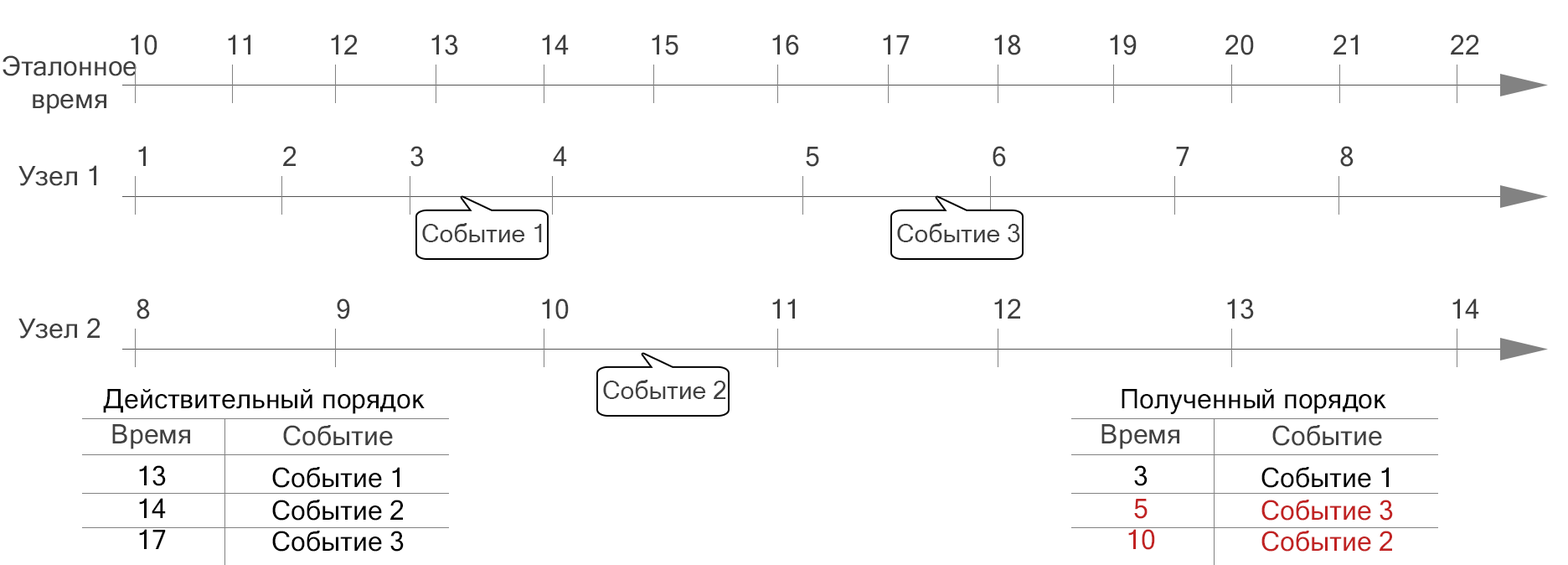
<style>
.page{position:relative;width:1568px;height:565px;background:#ffffff}
.page>*{position:absolute;margin:0}
.t1{font:26.8px "MicrosoftSansSerif";color:#3f3f3f}
.t2{font:25.1px "MicrosoftSansSerif";color:#414141}
.t3{font:26.8px "MicrosoftSansSerif";color:#000000}
.t4{font:26.8px "MicrosoftSansSerif";color:#414141}
.t5{font:26.8px "MicrosoftSansSerif";color:#c12222}
</style>
<div class="page">
<p class="t1" style="left:131px;top:34px;width:26px;height:21px">10</p>
<p class="t1" style="left:228px;top:34px;width:22px;height:20px">11</p>
<p class="t1" style="left:331px;top:34px;width:26px;height:20px">12</p>
<p class="t1" style="left:431px;top:34px;width:27px;height:21px">13</p>
<p class="t1" style="left:542px;top:34px;width:27px;height:20px">14</p>
<p class="t1" style="left:652px;top:34px;width:26px;height:21px">15</p>
<p class="t1" style="left:772px;top:34px;width:27px;height:21px">16</p>
<p class="t1" style="left:883px;top:34px;width:27px;height:20px">17</p>
<p class="t1" style="left:994px;top:34px;width:27px;height:21px">18</p>
<p class="t1" style="left:1110px;top:34px;width:27px;height:21px">19</p>
<p class="t1" style="left:1225px;top:34px;width:29px;height:21px">20</p>
<p class="t1" style="left:1333px;top:34px;width:25px;height:20px">21</p>
<p class="t1" style="left:1451px;top:34px;width:27px;height:20px">22</p>
<p class="t1" style="left:3px;top:55px;width:134px;height:59px;text-align:center">Эталонное<br>время</p>
<p class="t1" style="left:138px;top:146px;width:8px;height:20px">1</p>
<p class="t1" style="left:283px;top:146px;width:13px;height:20px">2</p>
<p class="t1" style="left:410px;top:146px;width:14px;height:21px">3</p>
<p class="t1" style="left:553px;top:146px;width:14px;height:20px">4</p>
<p class="t1" style="left:806px;top:147px;width:13px;height:20px">5</p>
<p class="t1" style="left:993px;top:146px;width:13px;height:21px">6</p>
<p class="t1" style="left:1176px;top:147px;width:13px;height:19px">7</p>
<p class="t1" style="left:1340px;top:146px;width:14px;height:21px">8</p>
<p class="t1" style="left:18px;top:165px;width:78px;height:21px">Узел 1</p>
<p class="t2" style="left:422px;top:223px;width:120px;height:19px">Событие 1</p>
<p class="t2" style="left:897px;top:223px;width:123px;height:19px">Событие 3</p>
<p class="t1" style="left:137px;top:298px;width:13px;height:21px">8</p>
<p class="t1" style="left:337px;top:298px;width:13px;height:21px">9</p>
<p class="t1" style="left:542px;top:298px;width:27px;height:21px">10</p>
<p class="t1" style="left:772px;top:298px;width:23px;height:20px">11</p>
<p class="t1" style="left:994px;top:298px;width:26px;height:20px">12</p>
<p class="t1" style="left:1227px;top:298px;width:27px;height:21px">13</p>
<p class="t1" style="left:1452px;top:298px;width:27px;height:20px">14</p>
<p class="t1" style="left:18px;top:317px;width:82px;height:21px">Узел 2</p>
<p class="t3" style="left:103px;top:389px;width:322px;height:25px">Действительный порядок</p>
<p class="t2" style="left:603px;top:379px;width:123px;height:20px">Событие 2</p>
<p class="t3" style="left:1122px;top:389px;width:264px;height:25px">Полученный порядок</p>
<p class="t4" style="left:112px;top:424px;width:78px;height:25px">Время</p>
<p class="t4" style="left:283px;top:425px;width:110px;height:21px">Событие</p>
<p class="t4" style="left:1101px;top:424px;width:78px;height:25px">Время</p>
<p class="t4" style="left:1272px;top:425px;width:110px;height:21px">Событие</p>
<p class="t3" style="left:139px;top:465px;width:27px;height:21px">13</p>
<p class="t3" style="left:272px;top:467px;width:128px;height:20px">Событие 1</p>
<p class="t3" style="left:1134px;top:465px;width:14px;height:21px">3</p>
<p class="t3" style="left:1261px;top:467px;width:128px;height:20px">Событие 1</p>
<p class="t3" style="left:139px;top:498px;width:27px;height:20px">14</p>
<p class="t3" style="left:272px;top:499px;width:131px;height:21px">Событие 2</p>
<p class="t5" style="left:1134px;top:498px;width:14px;height:20px">5</p>
<p class="t5" style="left:1261px;top:499px;width:132px;height:21px">Событие 3</p>
<p class="t3" style="left:139px;top:529px;width:27px;height:20px">17</p>
<p class="t3" style="left:272px;top:530px;width:132px;height:21px">Событие 3</p>
<p class="t5" style="left:1128px;top:529px;width:27px;height:20px">10</p>
<p class="t5" style="left:1261px;top:530px;width:131px;height:21px">Событие 2</p>
</div>
